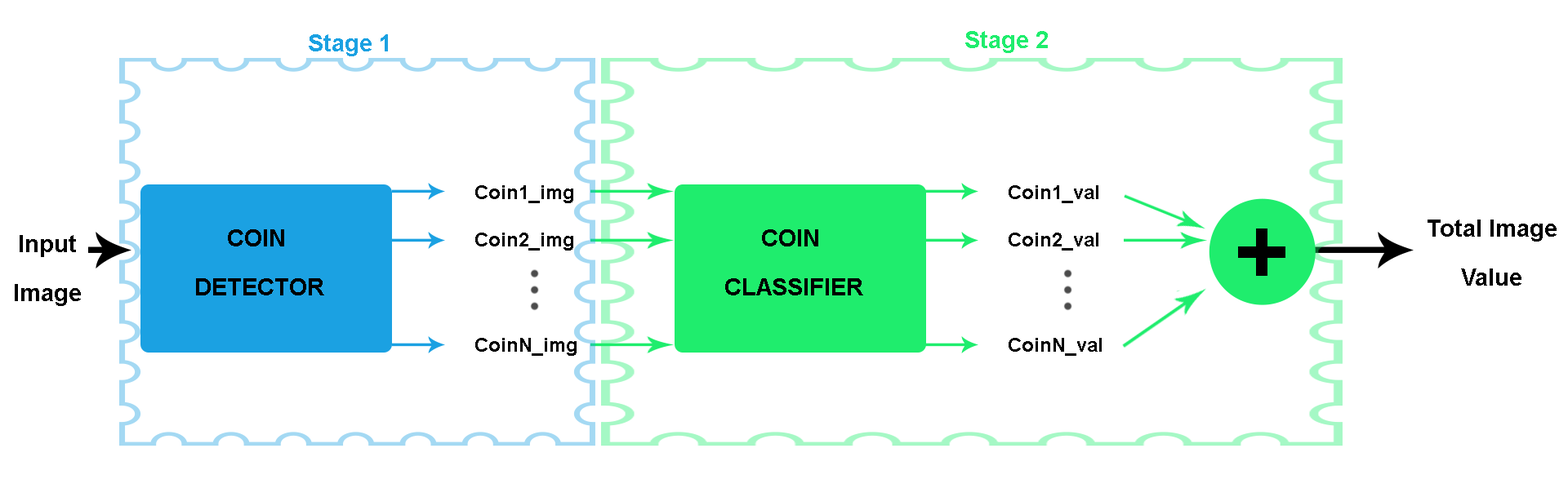
<style>
.page{position:relative;width:1568px;height:488px;background:#ffffff}
.page>*{position:absolute;margin:0}
.t1{font:40.8px "Arial-BoldMT";color:#1ba1e2}
.t2{font:40.8px "Arial-BoldMT";color:#1fed6d}
.t3{font:34.3px "Arial-BoldMT";color:#000000}
.t4{font:40.8px "Arial-BoldMT";color:#000000}
.t5{font:163.3px "Arial-BoldMT";color:#000000}
</style>
<div class="page">
<p class="t1" style="left:309px;top:34px;width:79px;height:22px">Stage 1</p>
<p class="t2" style="left:965px;top:31px;width:83px;height:22px">Stage 2</p>
<p class="t3" style="left:475px;top:185px;width:98px;height:18px">Coin1_img</p>
<p class="t3" style="left:1009px;top:185px;width:89px;height:18px">Coin1_val</p>
<p class="t4" style="left:1428px;top:220px;width:129px;height:66px;text-align:center">Total Image<br>Value</p>
<p class="t4" style="left:196px;top:229px;width:128px;height:67px;text-align:center">COIN <br>DETECTOR</p>
<p class="t3" style="left:475px;top:233px;width:98px;height:18px">Coin2_img</p>
<p class="t4" style="left:725px;top:229px;width:138px;height:67px;text-align:center">COIN <br>CLASSIFIER</p>
<p class="t3" style="left:1009px;top:233px;width:89px;height:18px">Coin2_val</p>
<p class="t5" style="left:1238px;top:229px;width:47px;height:47px">+</p>
<p class="t4" style="left:15px;top:235px;width:66px;height:71px;text-align:center">Input<br>Image</p>
<p class="t3" style="left:475px;top:338px;width:102px;height:18px">CoinN_img</p>
<p class="t3" style="left:1009px;top:338px;width:93px;height:18px">CoinN_val</p>
</div>
